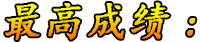
<style>
.page{position:relative;width:200px;height:42px;background:#ffffff}
.page>*{position:absolute;margin:0}
.t1{font:40px "¿¬Ìå";letter-spacing:0.06em;font-weight:bold;font-style:italic}
</style>
<div class="page">
<p class="t1" style="left:5px;top:2px;width:191px;height:38px">最高成绩:</p>
</div>
